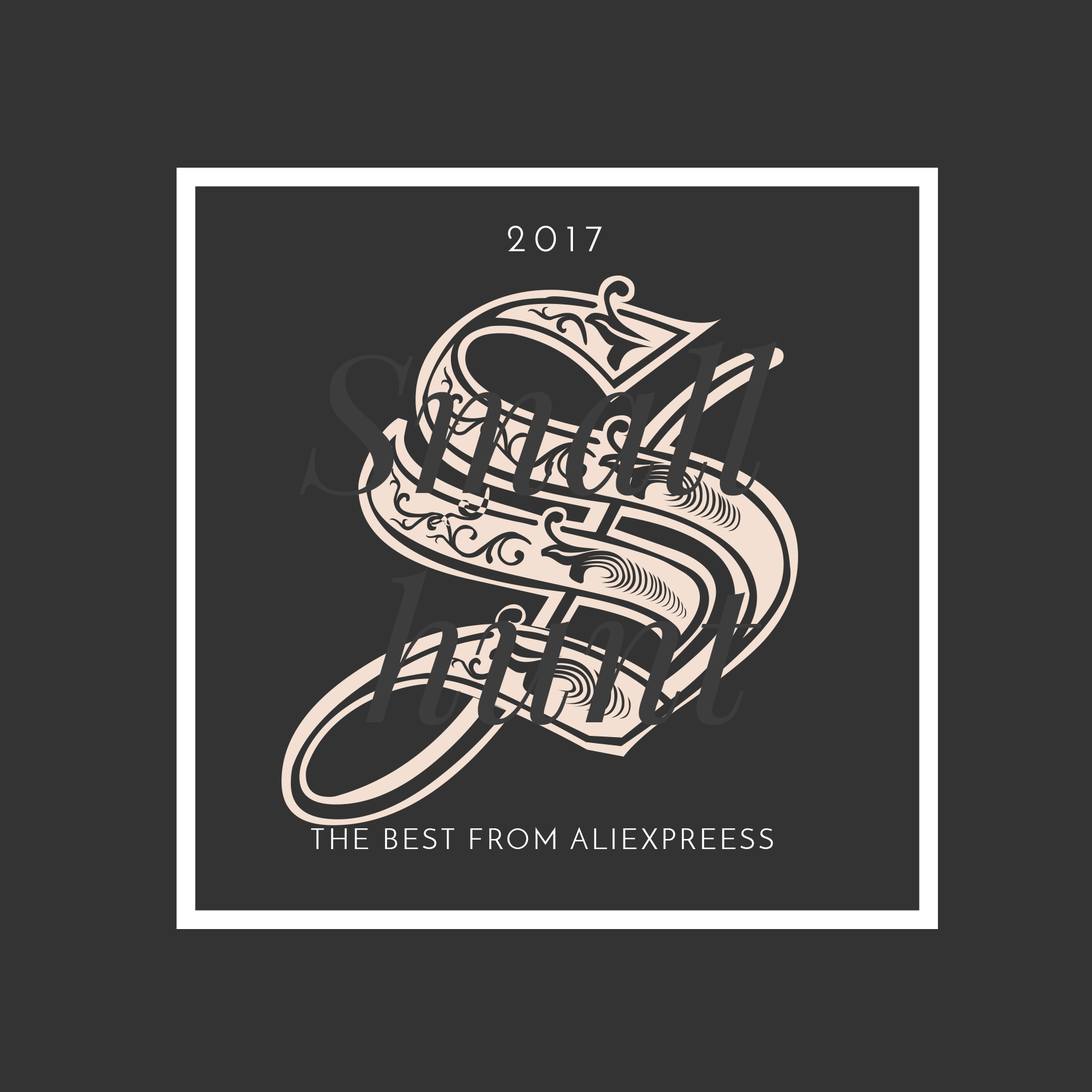
<style>
.page{position:relative;width:1092px;height:1092px;background:#333333}
.page>*{position:absolute;margin:0}
.t1{font:38px "JosefinSans";letter-spacing:0.2em;color:#ffffff}
.t2{font:576.8px "Royal2";color:#f3e0d3}
.t3{font:28.8px "JosefinSans";letter-spacing:0.1em;color:#ffffff;text-transform:uppercase}
</style>
<div class="page">
<p class="t1" style="left:508px;top:226px;width:94px;height:26px">2017</p>
<p class="t2" style="left:281px;top:276px;width:517px;height:549px">S</p>
<p class="t3" style="left:311px;top:827px;width:462px;height:22px">The best from AliExpreess</p>
</div>
